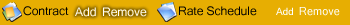
<style>
.page{position:relative;width:350px;height:25px;background:#e7ae02}
.page>*{position:absolute;margin:0}
.t1{font:12px "MicrosoftSansSerif";color:#010101}
.t2{font:12px "MicrosoftSansSerif";color:#fefffe}
.t3{font:10px "MicrosoftSansSerif";color:#fefffe}
.t4{font:11px "MicrosoftSansSerif";color:#fefffe}
</style>
<div class="page">
<p class="t1" style="left:23px;top:6px;width:46px;height:10px">Contract</p>
<p class="t1" style="left:179px;top:6px;width:78px;height:10px">Rate Schedule</p>
<p class="t2" style="left:75px;top:7px;width:21px;height:10px">Add</p>
<p class="t2" style="left:103px;top:7px;width:44px;height:10px">Remove</p>
<p class="t3" style="left:276px;top:7px;width:17px;height:8px">Add</p>
<p class="t4" style="left:299px;top:7px;width:41px;height:9px">Remove</p>
</div>
